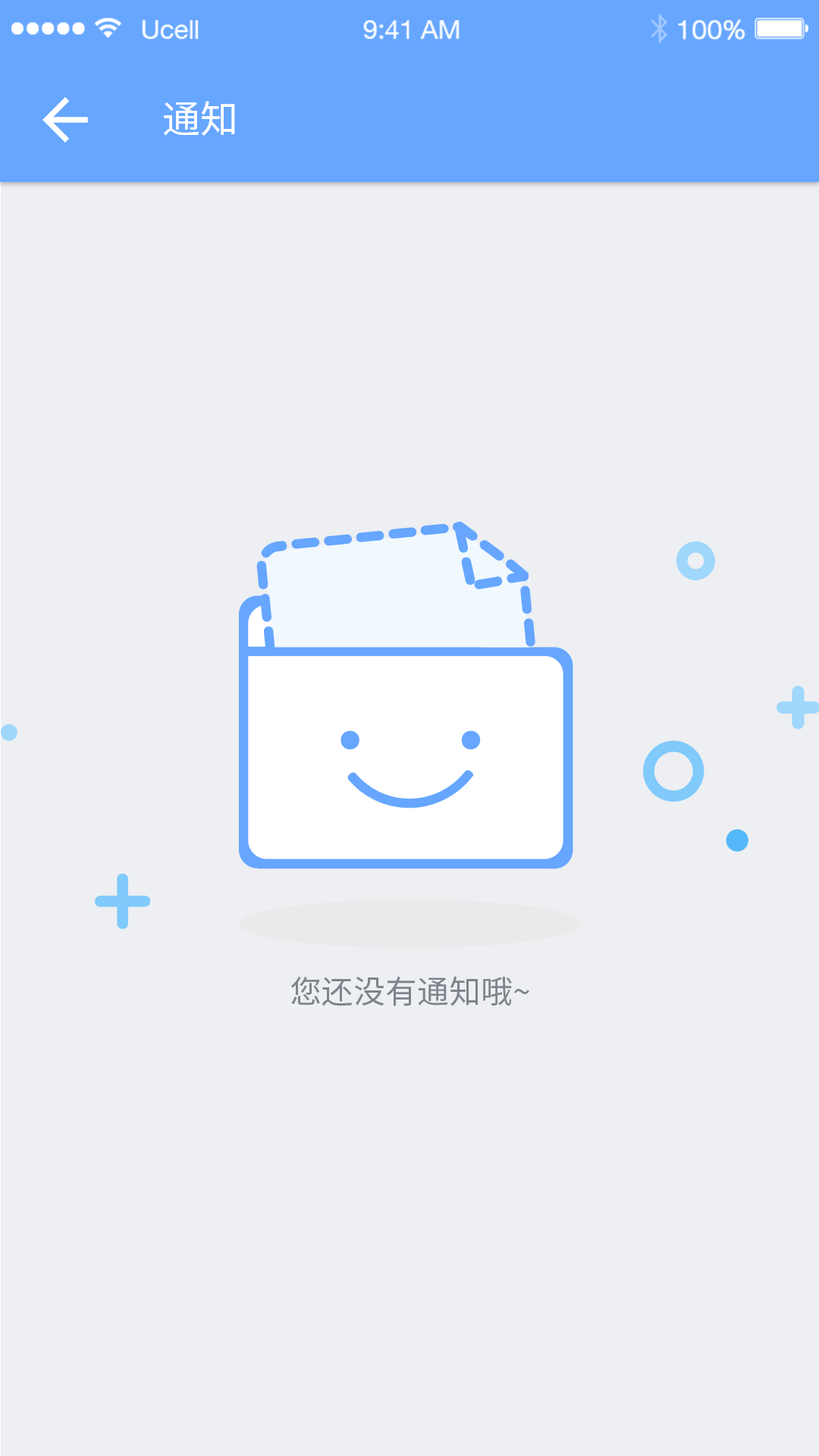
<style>
.page{position:relative;width:819px;height:1456px;background:#edeff2}
.page>*{position:absolute;margin:0}
.t1{font:37.9px "NotoSansHans-Regular";color:#ffffff}
.t2{font:31.8px "NotoSansHans-Regular";color:#7e848c}
</style>
<div class="page">
<p class="t1" style="left:164px;top:101px;width:71px;height:35px">通知</p>
<p class="t2" style="left:291px;top:976px;width:238px;height:30px">您还没有通知哦~</p>
</div>
